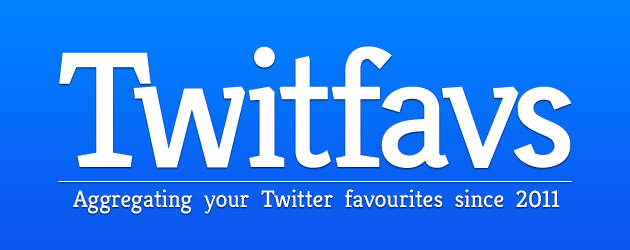
<style>
.page{position:relative;width:630px;height:250px}
.page>*{position:absolute;margin:0}
.t1{font:164.7px "Kreon";letter-spacing:-0.05em;color:#ffffff}
.t2{font:164.7px "Kreon";letter-spacing:-0.085em;color:#ffffff}
.t3{font:164.7px "Kreon";letter-spacing:-0.03em;color:#ffffff}
.t4{font:164.7px "Kreon";letter-spacing:-0.025em;color:#ffffff}
.t5{font:164.7px "Kreon";letter-spacing:-0.075em;color:#ffffff}
.t6{font:24px "Kreon";color:#ffffff}
</style>
<div class="page">
<p class="t1" style="left:59px;top:46px;width:513px;height:122px"><span class="t2">T</span><span class="t3">w</span>i<span class="t4">t</span>fav<span class="t5">s</span></p>
<p class="t6" style="left:73px;top:189px;width:487px;height:25px">Aggregating  your  Twitter  favourites  since  2011</p>
</div>
